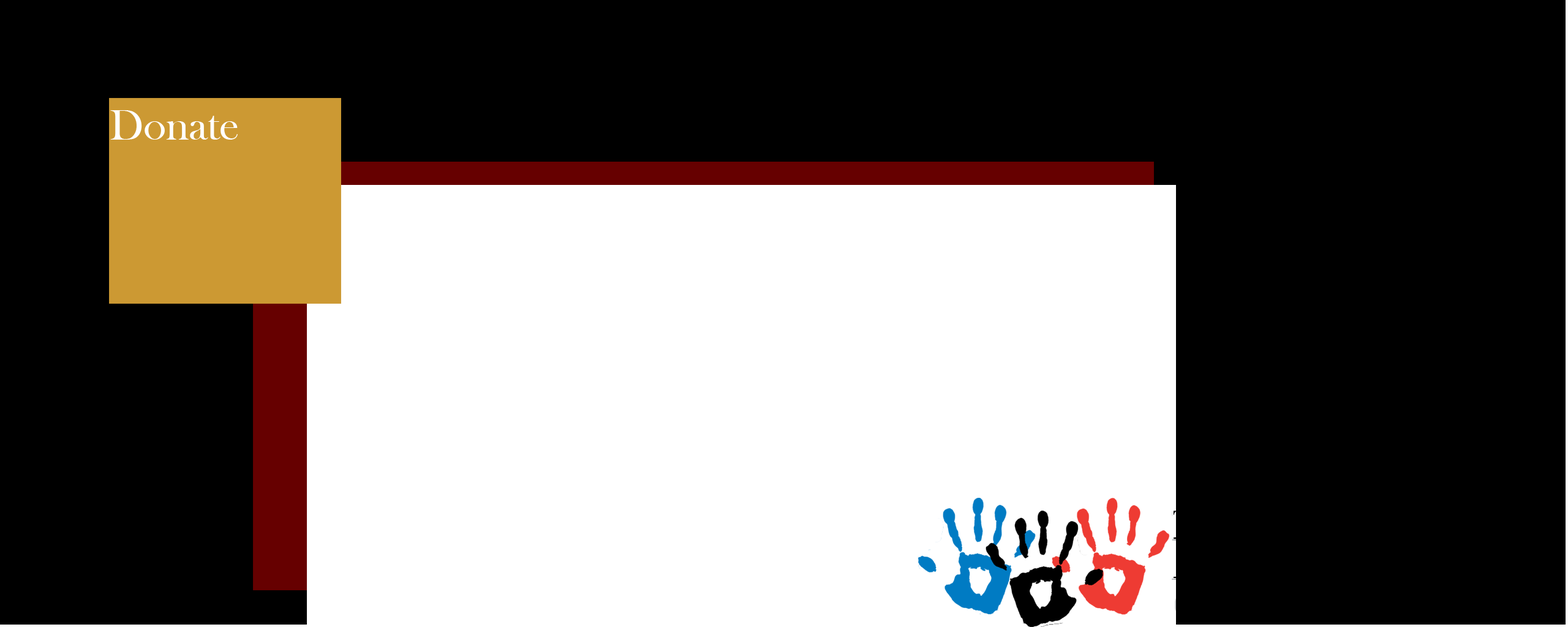
<style>
.page{position:relative;width:1568px;height:627px;background:#000000}
.page>*{position:absolute;margin:0}
.t1{font:44.1px "BaskOldFace";color:#ffffff}
</style>
<div class="page">
<p class="t1" style="left:110px;top:110px;width:128px;height:30px">Donate</p>
</div>
